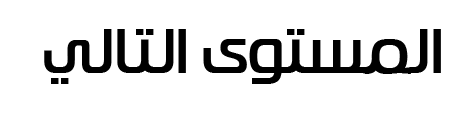
<style>
.page{position:relative;width:475px;height:116px;background:#ffffff}
.page>*{position:absolute;margin:0}
.t1{font:62.5px "HacenSaudiArabia";color:#000000}
</style>
<div class="page">
<p class="t1" style="left:44px;top:29px;width:397px;height:55px">المستوى التالي</p>
</div>
